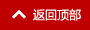
<style>
.page{position:relative;width:90px;height:30px;background:#bf0000}
.page>*{position:absolute;margin:0}
.t1{font:12px "MicrosoftYaHei";color:#ffffff}
</style>
<div class="page">
<p class="t1" style="left:33px;top:8px;width:48px;height:13px">返回顶部</p>
</div>
